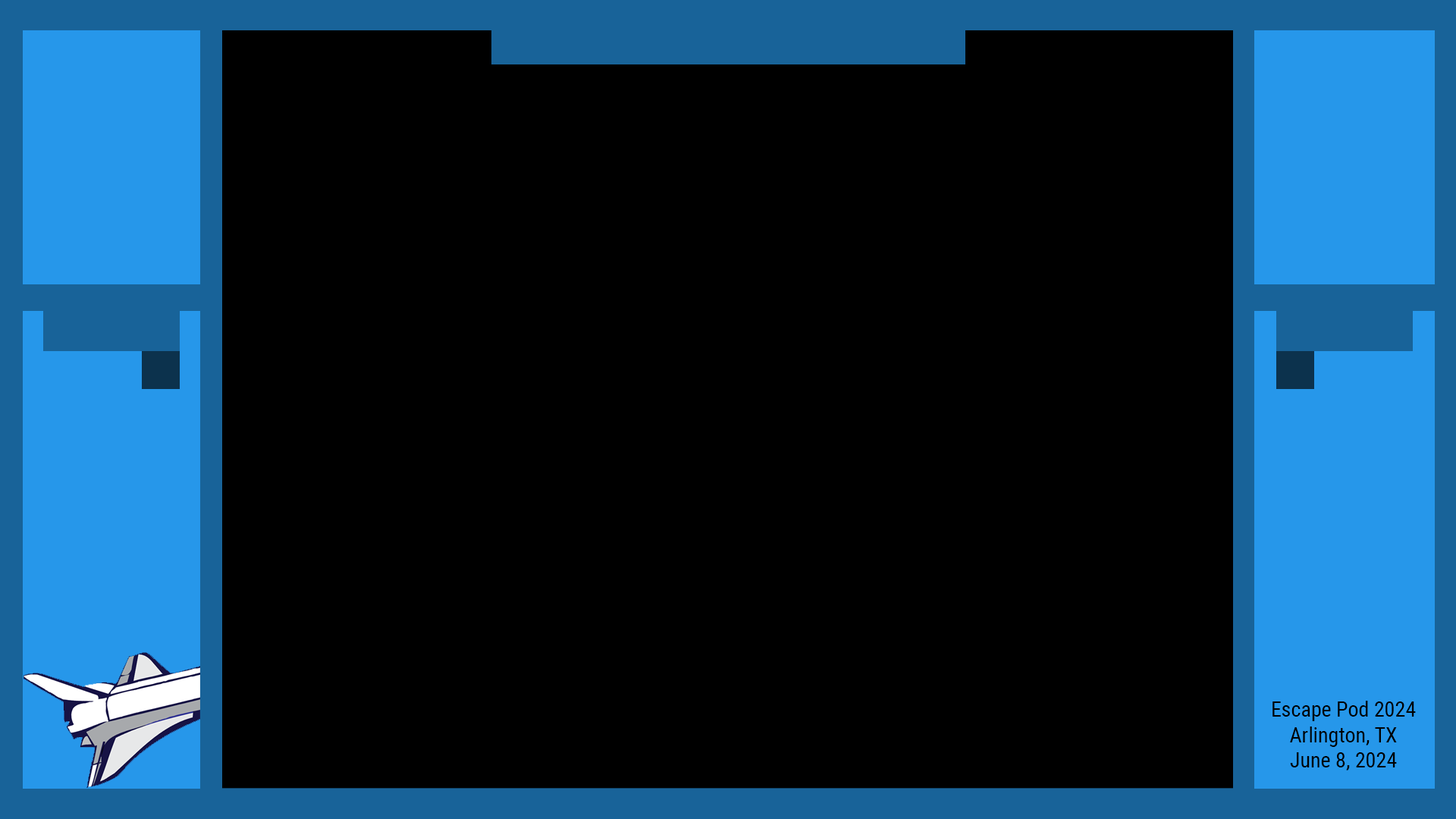
<style>
.page{position:relative;width:1456px;height:819px;background:#000000}
.page>*{position:absolute;margin:0}
.t1{font:21.2px "RobotoCondensed-Regular";color:#000000}
</style>
<div class="page">
<p class="t1" style="left:1272px;top:701px;width:144px;height:69px;text-align:center">Escape Pod 2024<br>Arlington, TX<br>June 8, 2024</p>
</div>
